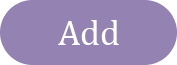
<style>
.page{position:relative;width:177px;height:65px;background:#9482b2}
.page>*{position:absolute;margin:0}
.t1{font:36px "Cambria";color:#ffffff}
</style>
<div class="page">
<p class="t1" style="left:58px;top:20px;width:61px;height:25px">Add</p>
</div>
